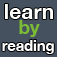
<style>
.page{position:relative;width:57px;height:57px;background:#45515e}
.page>*{position:absolute;margin:0}
.t1{font:21.2px "HelveticaNeue-Bold";color:#fefefc}
.t2{font:18.8px "HelveticaNeue-Bold";color:#7cbb36}
.t3{font:14.6px "HelveticaNeue-Bold";color:#ffffff}
</style>
<div class="page">
<p class="t1" style="left:5px;top:4px;width:48px;height:15px">learn</p>
<p class="t2" style="left:19px;top:20px;width:21px;height:17px">by</p>
<p class="t3" style="left:2px;top:40px;width:52px;height:14px">reading</p>
</div>
